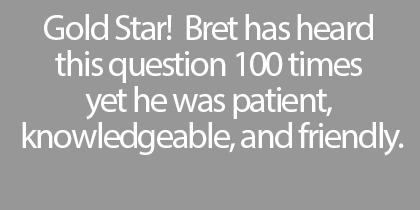
<style>
.page{position:relative;width:420px;height:210px;background:#979797}
.page>*{position:absolute;margin:0}
.t1{font:36px/36px "MyriadPro-Regular";letter-spacing:-0.05em;color:#ffffff}
</style>
<div class="page">
<p class="t1" style="left:22px;top:14px;width:382px;height:142px;text-align:center">Gold Star!  Bret has heard <br>this question 100 times <br>yet he was patient, <br>knowledgeable, and friendly.</p>
</div>
